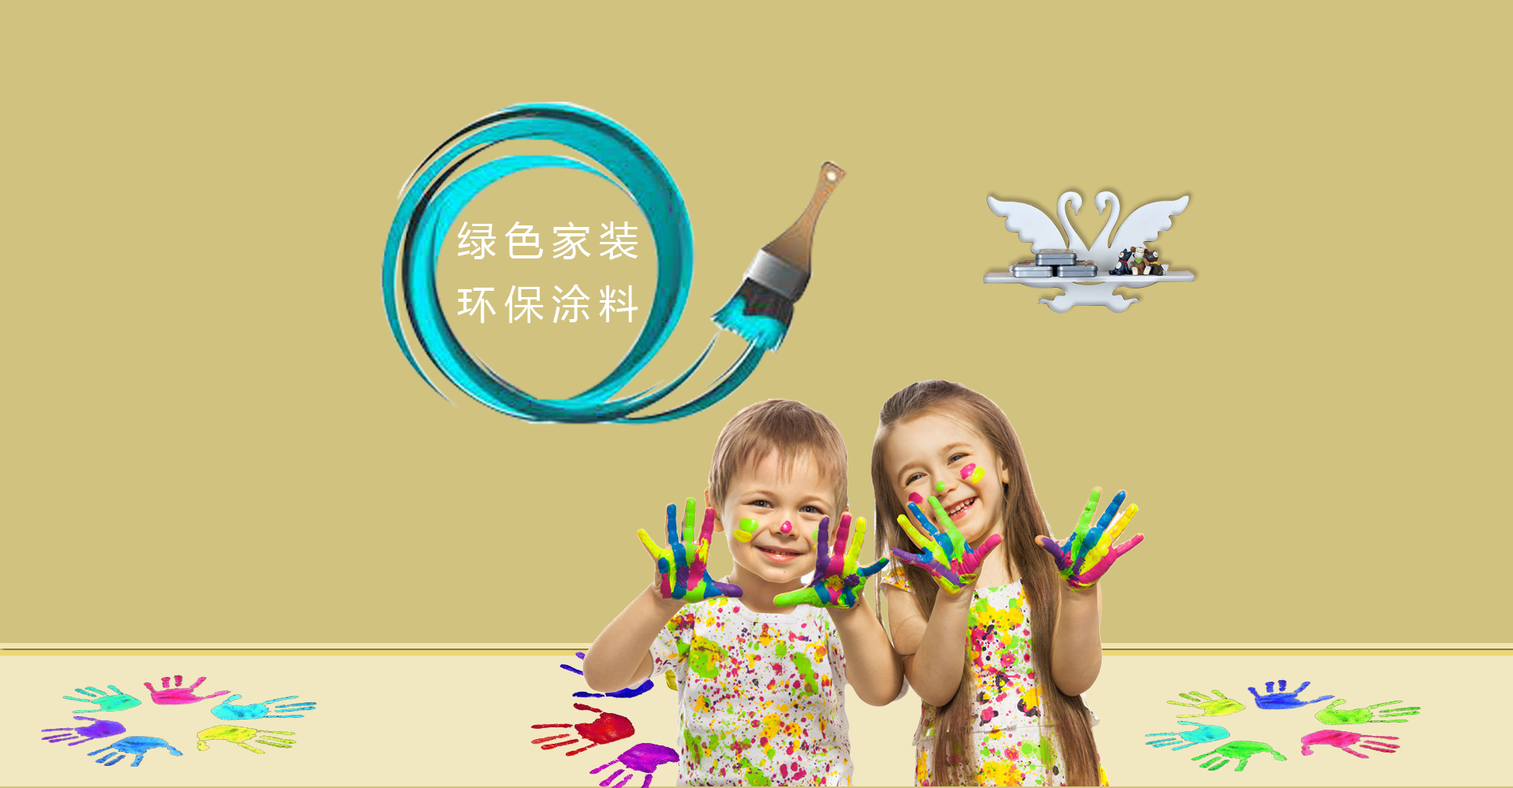
<style>
.page{position:relative;width:1513px;height:788px;background:#d1c27f}
.page>*{position:absolute;margin:0}
.t1{font:39.4px/63px "MicrosoftYaHei";letter-spacing:0.2em;color:#ffffff}
</style>
<div class="page">
<p class="t1" style="left:457px;top:221px;width:181px;height:102px;text-align:justify">绿色家装<br>环保涂料</p>
</div>
